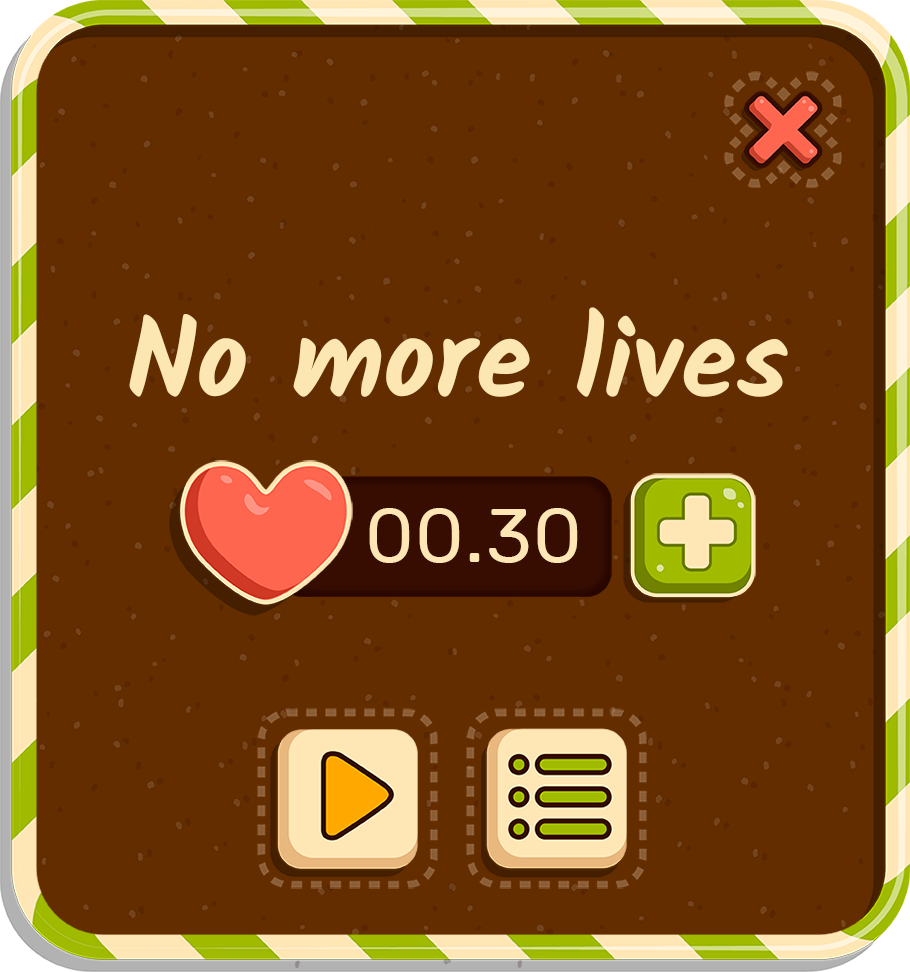
<style>
.page{position:relative;width:910px;height:972px;background:#632d00}
.page>*{position:absolute;margin:0}
.t1{font:112.2px "Kalam-Bold";color:#fce6b2}
.t2{font:76.3px "Rubik-Regular";letter-spacing:0.025em;color:#ffe6b5}
</style>
<div class="page">
<p class="t1" style="left:129px;top:307px;width:659px;height:90px">No more lives</p>
<p class="t2" style="left:369px;top:508px;width:209px;height:55px">00.30</p>
</div>
